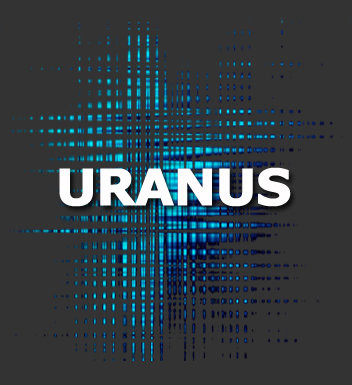
<style>
.page{position:relative;width:352px;height:385px;background:#333333}
.page>*{position:absolute;margin:0}
.t1{font:49.5px "Verdana-Bold";letter-spacing:-0.025em;color:#fffdfd;font-weight:bold}
</style>
<div class="page">
<p class="t1" style="left:59px;top:167px;width:232px;height:40px">URANUS</p>
</div>
